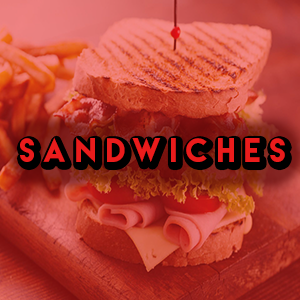
<style>
.page{position:relative;width:300px;height:300px}
.page>*{position:absolute;margin:0}
.t1{font:30px "LemonMilk";letter-spacing:0.3em;color:#ea1c1c}
</style>
<div class="page">
<p class="t1" style="left:20px;top:137px;width:265px;height:26px">Sandwiches</p>
</div>
